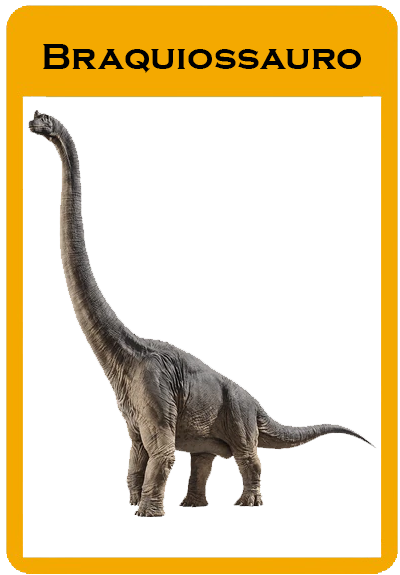
<style>
.page{position:relative;width:400px;height:575px;background:#ffffff}
.page>*{position:absolute;margin:0}
.t1{font:37.3px "CopperplateGothic-Bold";color:#000000}
</style>
<div class="page">
<p class="t1" style="left:43px;top:44px;width:318px;height:29px">Braquiossauro</p>
</div>
